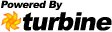
<style>
.page{position:relative;width:112px;height:32px;background:#ffffff}
.page>*{position:absolute;margin:0}
.t1{font:10px "Arial-Black";letter-spacing:-0.035em;color:#000000;font-style:italic}
.t2{font:25px "Arial-Black";letter-spacing:-0.04em;color:#000000;font-style:italic}
.t3{font:25px "Arial-Black";letter-spacing:-0.06em;color:#000000;font-style:italic}
</style>
<div class="page">
<p class="t1" style="left:1px;top:0px;width:62px;height:10px">Powered By</p>
<p class="t2" style="left:22px;top:12px;width:90px;height:19px">turb<span class="t3">i</span>ne</p>
</div>
